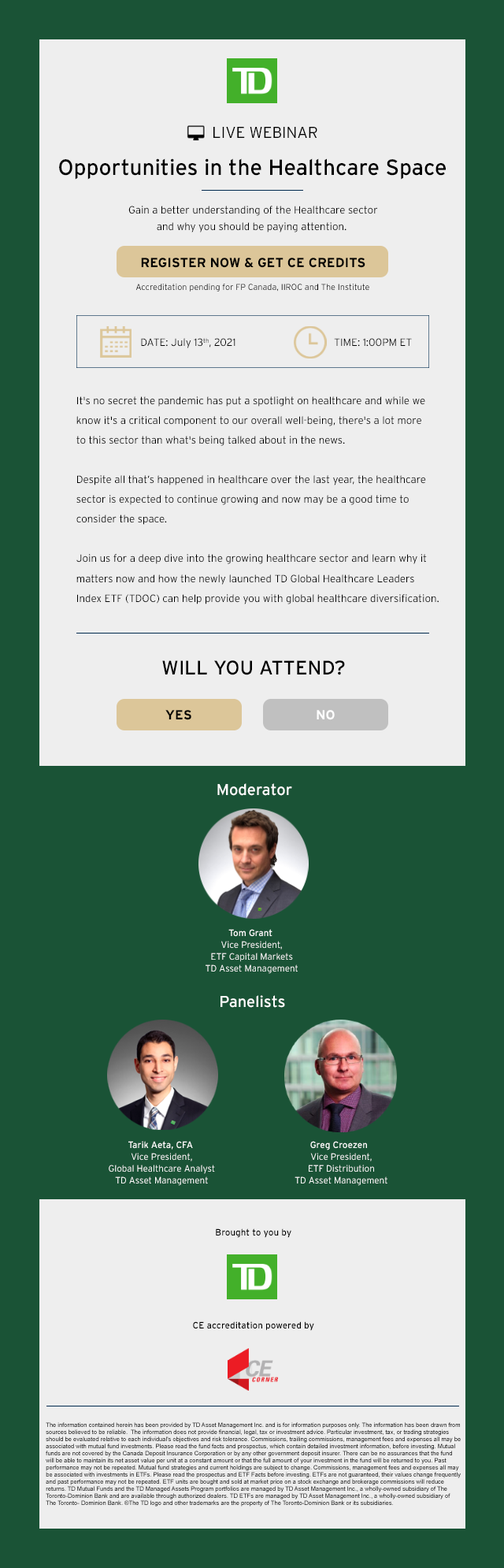
<style>
.page{position:relative;width:504px;height:1568px;background:#1a5336}
.page>*{position:absolute;margin:0}
.t1{font:15.8px "Interstate-Light";color:#000000}
.t2{font:22.1px "Interstate-Regular";color:#000000}
.t3{font:10.5px/15.8px "Interstate-Light";color:#000000}
.t4{font:13.2px "Interstate-Bold";color:#000000}
.t5{font:8.6px "Interstate-Light";color:#000000}
.t6{font:10.5px "Interstate-Light";color:#000000}
.t7{font:10.5px/19.7px "Interstate-Light";color:#000000}
.t8{font:19.7px "Interstate-Regular";color:#000000}
.t9{font:13.2px "Interstate-Bold";color:#ffffff}
.t10{font:15.8px "Interstate-Regular";color:#ffffff}
.t11{font:9.2px/11.8px "Interstate-Light";color:#ffffff}
.t12{font:9.2px/11.8px "Interstate-Regular";color:#ffffff}
.t13{font:9.2px "Interstate-Regular";color:#000000}
.t14{font:5.9px "ArialMT";color:#000000}
</style>
<div class="page">
<p class="t1" style="left:214px;top:127px;width:104px;height:11px">LIVE WEBINAR</p>
<p class="t2" style="left:59px;top:158px;width:387px;height:22px">Opportunities in the Healthcare Space</p>
<p class="t3" style="left:128px;top:206px;width:250px;height:26px;text-align:center">Gain a better understanding of the Healthcare sector<br>and why you should be paying attention.</p>
<p class="t4" style="left:141px;top:258px;width:225px;height:10px">REGISTER NOW &amp; GET CE CREDITS</p>
<p class="t5" style="left:136px;top:284px;width:234px;height:8px">Accreditation pending for FP Canada, IIROC and The Institute</p>
<p class="t6" style="left:141px;top:338px;width:95px;height:10px">DATE: July 13th, 2021</p>
<p class="t6" style="left:334px;top:338px;width:78px;height:9px">TIME: 1:00PM ET</p>
<p class="t7" style="left:76px;top:396px;width:363px;height:208px">It's no secret the pandemic has put a spotlight on healthcare and while we<br>know it's a critical component to our overall well-being, there's a lot more<br>to this sector than what's being talked about in the news.<br> <br>Despite all that’s happened in healthcare over the last year, the healthcare<br>sector is expected to continue growing and now may be a good time to<br>consider the space.<br> <br>Join us for a deep dive into the growing healthcare sector and learn why it<br>matters now and how the newly launched TD Global Healthcare Leaders<br>Index ETF (TDOC) can help provide you with global healthcare diversification.</p>
<p class="t8" style="left:162px;top:660px;width:183px;height:15px">WILL YOU ATTEND?</p>
<p class="t4" style="left:165px;top:710px;width:26px;height:10px">YES</p>
<p class="t9" style="left:317px;top:710px;width:18px;height:10px">NO</p>
<p class="t10" style="left:217px;top:783px;width:75px;height:13px">Moderator</p>
<p class="t11" style="left:206px;top:929px;width:92px;height:45px;text-align:center"><span class="t12">Tom Grant <br></span>Vice President,<br>ETF Capital Markets<br>TD Asset Management</p>
<p class="t10" style="left:221px;top:995px;width:64px;height:13px">Panelists</p>
<p class="t11" style="left:109px;top:1141px;width:106px;height:45px;text-align:center"><span class="t12">Tarik Aeta, CFA <br></span>Vice President,<br>Global Healthcare Analyst<br>TD Asset Management</p>
<p class="t11" style="left:295px;top:1141px;width:93px;height:45px;text-align:center"><span class="t12">Greg Croezen  <br></span>Vice President,<br>ETF Distribution<br>TD Asset Management</p>
<p class="t13" style="left:216px;top:1228px;width:76px;height:10px">Brought to you by</p>
<p class="t13" style="left:193px;top:1321px;width:121px;height:10px">CE accreditation powered by</p>
<p class="t14" style="left:46px;top:1422px;width:415px;height:85px">The information contained herein has been provided by TD Asset Management Inc. and is for information purposes only. The information has been drawn from<br>sources believed to be reliable.  The information does not provide financial, legal, tax or investment advice. Particular investment, tax, or trading strategies<br>should be evaluated relative to each individual's objectives and risk tolerance. Commissions, trailing commissions, management fees and expenses all may be<br>associated with mutual fund investments. Please read the fund facts and prospectus, which contain detailed investment information, before investing. Mutual<br>funds are not covered by the Canada Deposit Insurance Corporation or by any other government deposit insurer. There can be no assurances that the fund<br>will be able to maintain its net asset value per unit at a constant amount or that the full amount of your investment in the fund will be returned to you. Past<br>performance may not be repeated. Mutual fund strategies and current holdings are subject to change. Commissions, management fees and expenses all may<br>be associated with investments in ETFs. Please read the prospectus and ETF Facts before investing. ETFs are not guaranteed, their values change frequently<br>and past performance may not be repeated. ETF units are bought and sold at market price on a stock exchange and brokerage commissions will reduce<br>returns. TD Mutual Funds and the TD Managed Assets Program portfolios are managed by TD Asset Management Inc., a wholly-owned subsidiary of The<br>Toronto-Dominion Bank and are available through authorized dealers. TD ETFs are managed by TD Asset Management Inc., a wholly-owned subsidiary of<br>The Toronto- Dominion Bank. ®The TD logo and other trademarks are the property of The Toronto-Dominion Bank or its subsidiaries.</p>
</div>
